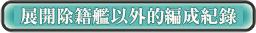
<style>
.page{position:relative;width:256px;height:33px}
.page>*{position:absolute;margin:0}
.t1{font:18px "RyuminPr6N-ExBold";color:#fff8f3}
</style>
<div class="page">
<p class="t1" style="left:20px;top:7px;width:217px;height:18px">展開除籍艦以外的編成紀錄</p>
</div>
